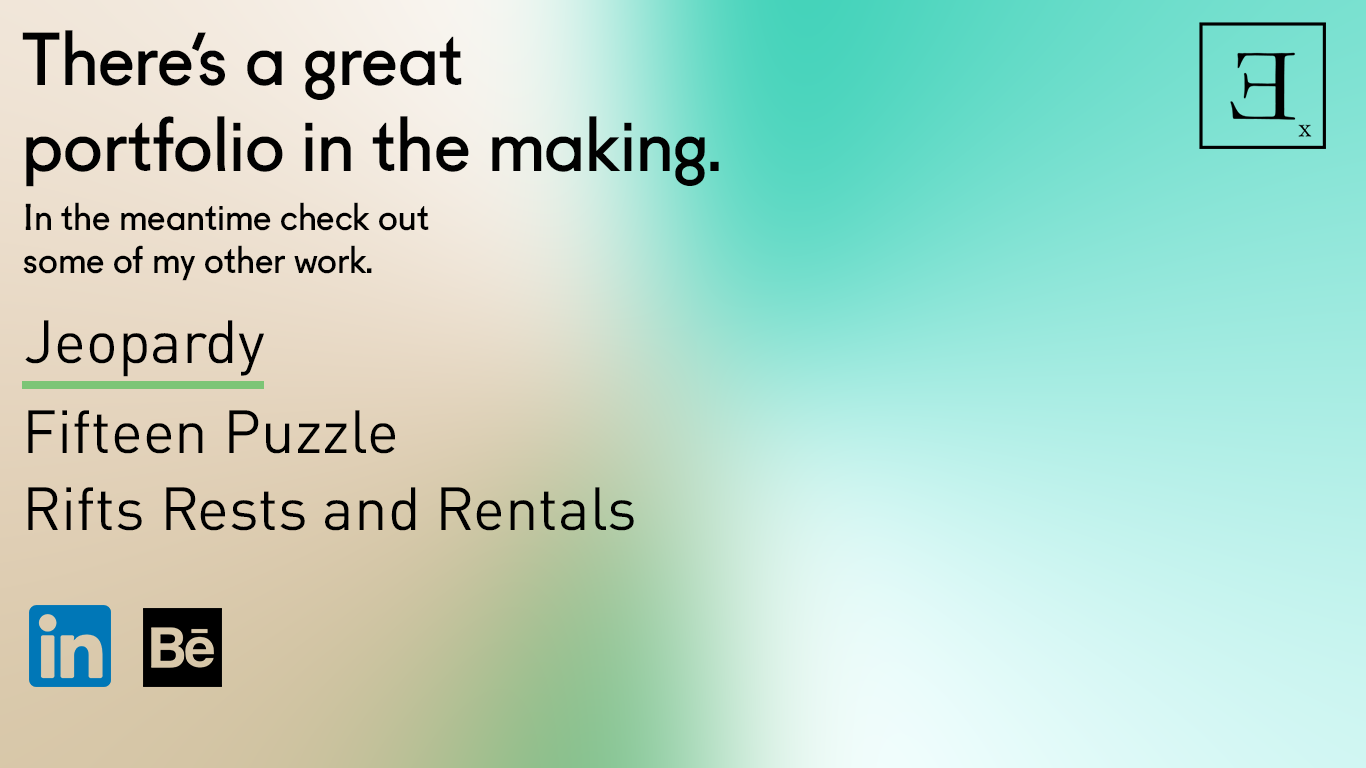
<style>
.page{position:relative;width:1366px;height:768px}
.page>*{position:absolute;margin:0}
.t1{font:72px "Fugue-Regular";color:#010101}
.t2{font:36px "Fugue-Regular";color:#000000}
.t3{font:60px "DINPro";color:#000000}
</style>
<div class="page">
<p class="t1" style="left:22px;top:30px;width:697px;height:157px">There’s a great<br>portfolio in the making.</p>
<p class="t2" style="left:23px;top:202px;width:406px;height:79px">In the meantime check out <br>some of my other work.</p>
<p class="t3" style="left:25px;top:320px;width:239px;height:57px">Jeopardy</p>
<p class="t3" style="left:28px;top:410px;width:367px;height:44px">Fifteen Puzzle</p>
<p class="t3" style="left:28px;top:487px;width:606px;height:44px">Rifts Rests and Rentals</p>
</div>
